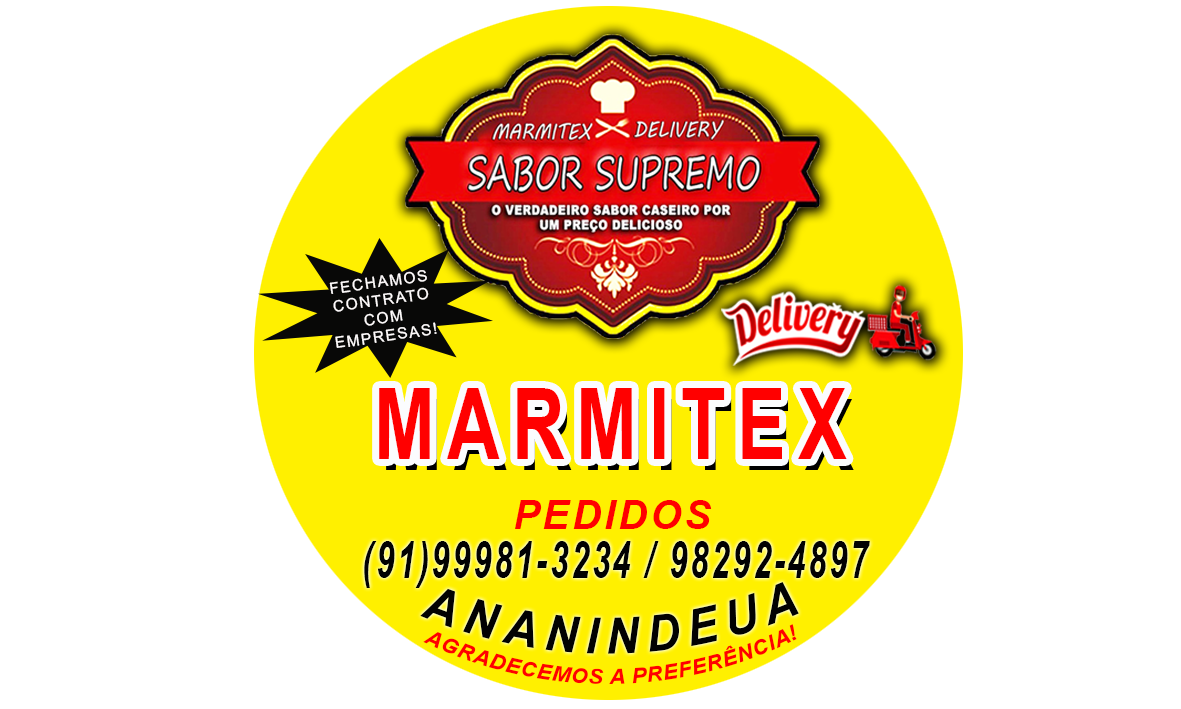
<style>
.page{position:relative;width:1181px;height:709px;background:#ffffff}
.page>*{position:absolute;margin:0}
.t1{font:15.5px/18.1px "ArialMT";letter-spacing:0.1em;color:#fffcfc}
.t2{font:98.8px "Arial-BoldMT";letter-spacing:0.16em;color:#ef0505;scale:0.74 1}
.t3{font:39.7px "Arial-BoldItalicMT";letter-spacing:0.08em;color:#ff0000}
.t4{font:51.8px "Arial-BoldItalicMT";letter-spacing:0.08em;color:#020202;scale:0.64 1}
.t5{font:50px "Arial-BoldItalicMT";letter-spacing:0.16em;color:#020202;scale:0.87 1}
.t6{font:20.8px "Arial-BoldItalicMT";letter-spacing:0.02em;color:#ff0000}
</style>
<div class="page">
<p class="t1" style="left:329px;top:270px;width:108px;height:78px;text-align:center;rotate:-8deg">FECHAMOS<br>CONTRATO<br>COM<br>EMPRESAS!</p>
<p class="t2" style="left:379px;top:388px;width:468px;height:71px">MARMITEX</p>
<p class="t3" style="left:515px;top:500px;width:197px;height:29px">PEDIDOS</p>
<p class="t4" style="left:364px;top:541px;width:506px;height:47px">(91)99981-3234 / 98292-4897</p>
<p class="t5" style="left:420px;top:582px;width:379px;height:72px;rotate:-1deg">ANANINDEUA</p>
<p class="t6" style="left:423px;top:624px;width:374px;height:60px;rotate:-1deg">AGRADECEMOS A PREFERÊNCIA!</p>
</div>
